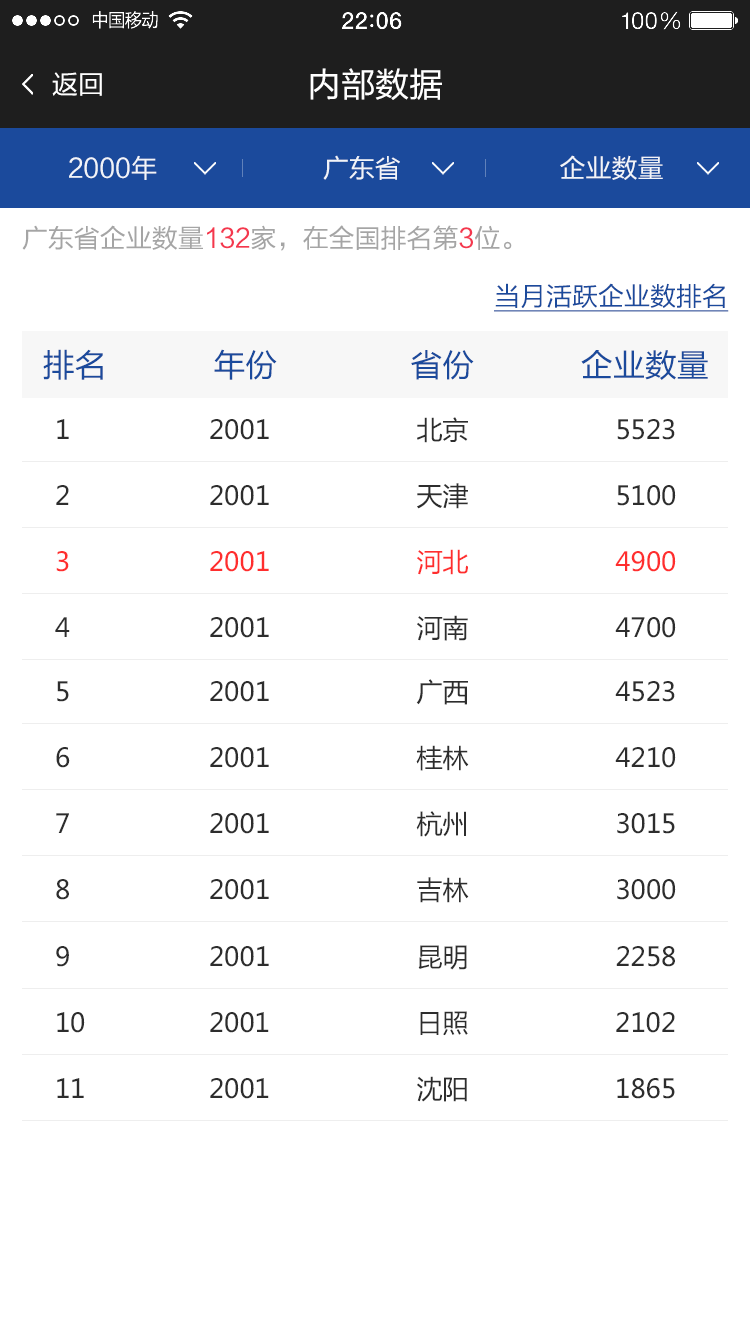
<style>
.page{position:relative;width:750px;height:1334px;background:#ffffff}
.page>*{position:absolute;margin:0}
.t1{font:26px "FZLTHJW--GB1-0";color:#ffffff}
.t2{font:34px "FZLTHJW--GB1-0";color:#ffffff}
.t3{font:26px "FZLTHJW--GB1-0";color:#f1f4f9}
.t4{font:26px "FZLTHJW--GB1-0";color:#a5a5a5}
.t5{font:26px "FZLTHJW--GB1-0";color:#f4374e}
.t6{font:26px "FZLTHJW--GB1-0";color:#1b4a9c;text-decoration:underline}
.t7{font:32px "FZLTHJW--GB1-0";color:#1b4a9c}
.t8{font:26px "MicrosoftYaHei";color:#2d2d2d}
.t9{font:26px "MicrosoftYaHei";color:#ff2e2e}
</style>
<div class="page">
<p class="t1" style="left:52px;top:72px;width:50px;height:24px">返回</p>
<p class="t2" style="left:310px;top:68px;width:132px;height:32px">内部数据</p>
<p class="t3" style="left:69px;top:155px;width:594px;height:25px">2000年                       广东省                      企业数量</p>
<p class="t4" style="left:22px;top:225px;width:490px;height:26px">广东省企业数量<span class="t5">132</span>家，在全国排名第<span class="t5">3</span>位。</p>
<p class="t6" style="left:494px;top:283px;width:235px;height:29px">当月活跃企业数排名</p>
<p class="t7" style="left:43px;top:349px;width:665px;height:31px">排名            年份               省份            企业数量</p>
<p class="t8" style="left:57px;top:417px;width:618px;height:26px">1                  2001                   北京                   5523</p>
<p class="t8" style="left:56px;top:483px;width:620px;height:26px">2                  2001                   天津                   5100</p>
<p class="t9" style="left:56px;top:549px;width:620px;height:26px">3                  2001                   河北                   4900</p>
<p class="t8" style="left:55px;top:615px;width:621px;height:26px">4                  2001                   河南                   4700</p>
<p class="t8" style="left:57px;top:679px;width:618px;height:26px">5                  2001                   广西                   4523</p>
<p class="t8" style="left:56px;top:745px;width:620px;height:26px">6                  2001                   桂林                   4210</p>
<p class="t8" style="left:56px;top:811px;width:619px;height:26px">7                  2001                   杭州                   3015</p>
<p class="t8" style="left:56px;top:877px;width:620px;height:26px">8                  2001                   吉林                   3000</p>
<p class="t8" style="left:56px;top:945px;width:619px;height:25px">9                  2001                   昆明                   2258</p>
<p class="t8" style="left:57px;top:1011px;width:618px;height:25px">10                2001                   日照                   2102</p>
<p class="t8" style="left:57px;top:1076px;width:618px;height:26px">11                2001                   沈阳                   1865</p>
</div>
